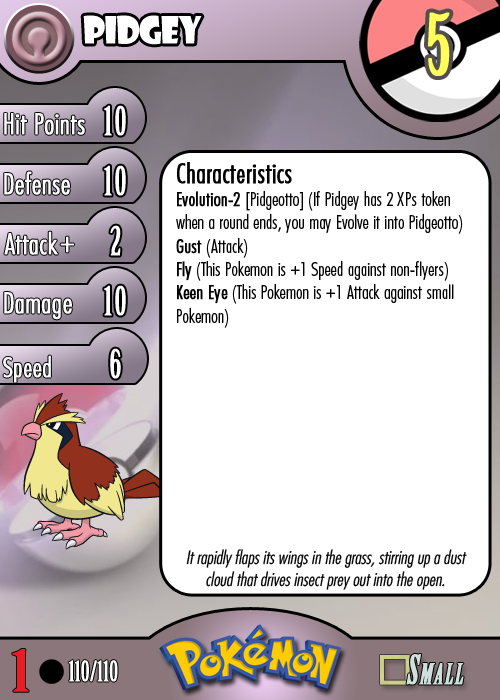
<style>
.page{position:relative;width:500px;height:700px;background:#ffffff}
.page>*{position:absolute;margin:0}
.t1{font:36.7px "ShowcardGothic-Reg";letter-spacing:-0.025em;color:#ffffff;scale:0.91 1}
.t2{font:83.3px "BirchStd";letter-spacing:0.025em;color:#fffd59;font-weight:bold}
.t3{font:27.8px "Futura-CondensedLight";color:#ffffff;font-weight:bold}
.t4{font:38.9px "BirchStd";letter-spacing:0.035em;color:#ffffff;font-weight:bold}
.t5{font:19.4px "FuturaCondensedBQ-Light";color:#010101}
.t6{font:27.8px "FuturaCondensedBQ-Light";color:#010101;font-weight:bold}
.t7{font:19.4px "FuturaCondensedBQ-Light";color:#010101;font-weight:bold}
.t8{font:30.6px "Futura-CondensedLight";color:#ffffff;font-weight:bold}
.t9{font:27.8px "FuturaCondensedBQ-Light";color:#ffffff;font-weight:bold}
.t10{font:18.1px "Futura-CondensedLight";color:#010101;font-style:italic}
.t11{font:55.6px "BirchStd";color:#ed1c24;font-weight:bold;scale:1.5 1}
.t12{font:27.8px "BirchStd";color:#ffffff;font-weight:bold}
</style>
<div class="page">
<p class="t1" style="left:83px;top:15px;width:119px;height:30px">pidgey</p>
<p class="t2" style="left:428px;top:12px;width:22px;height:64px">5</p>
<p class="t3" style="left:4px;top:113px;width:81px;height:22px">Hit Points</p>
<p class="t4" style="left:104px;top:105px;width:22px;height:31px">10</p>
<p class="t3" style="left:4px;top:171px;width:66px;height:24px">Defense</p>
<p class="t4" style="left:104px;top:165px;width:22px;height:31px">10</p>
<p class="t5" style="left:176px;top:162px;width:287px;height:166px"><span class="t6">Characteristics<br></span><span class="t7">Evolution-2 </span>[Pidgeotto] (If Pidgey has 2 XPs token when a round ends, you may Evolve it into Pidgeotto)<br><span class="t7">Gust</span> (Attack)<br><span class="t7">Fly</span> (This Pokemon is +1 Speed against non-flyers)<br><span class="t7">Keen Eye</span> (This Pokemon is +1 Attack against small Pokemon)</p>
<p class="t3" style="left:4px;top:231px;width:54px;height:24px">Attack</p>
<p class="t4" style="left:110px;top:225px;width:11px;height:31px">2</p>
<p class="t8" style="left:60px;top:236px;width:14px;height:17px">+</p>
<p class="t3" style="left:4px;top:292px;width:68px;height:28px">Damage</p>
<p class="t4" style="left:104px;top:285px;width:22px;height:31px">10</p>
<p class="t4" style="left:110px;top:348px;width:11px;height:31px">6</p>
<p class="t9" style="left:3px;top:355px;width:48px;height:28px">Speed</p>
<p class="t10" style="left:186px;top:549px;width:281px;height:41px;text-align:center">It rapidly flaps its wings in the grass, stirring up a dust cloud that drives insect prey out into the open.</p>
<p class="t11" style="left:12px;top:649px;width:17px;height:43px">1</p>
<p class="t12" style="left:68px;top:660px;width:50px;height:22px">110/110</p>
</div>
